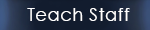
<style>
.page{position:relative;width:150px;height:30px;background:#121c2e}
.page>*{position:absolute;margin:0}
.t1{font:18px "CenturyGothic";letter-spacing:0.025em;color:#ffffff}
</style>
<div class="page">
<p class="t1" style="left:27px;top:8px;width:103px;height:13px">Teach Staff</p>
</div>
